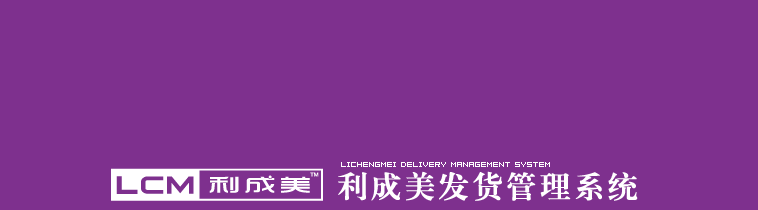
<style>
.page{position:relative;width:758px;height:210px;background:#7e308e}
.page>*{position:absolute;margin:0}
.t1{font:30px "FZXBSJW--GB1-0";letter-spacing:0.1em;color:#ffffff;font-weight:bold}
.t2{font:8px "04b08";color:#ffffff}
</style>
<div class="page">
<p class="t1" style="left:338px;top:171px;width:300px;height:30px">利成美发货管理系统</p>
<p class="t2" style="left:341px;top:162px;width:209px;height:5px">lichengmei delivery management system</p>
</div>
